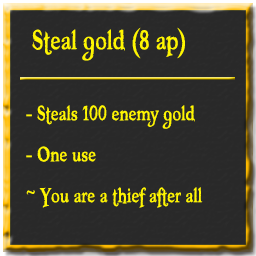
<style>
.page{position:relative;width:256px;height:256px;background:#292929}
.page>*{position:absolute;margin:0}
.t1{font:40px "Booter-ZeroZero";color:#fff600}
.t2{font:30px "Booter-ZeroZero";color:#fff600}
</style>
<div class="page">
<p class="t1" style="left:32px;top:27px;width:153px;height:34px">Steal gold (8 ap)</p>
<p class="t2" style="left:26px;top:105px;width:169px;height:24px">- Steals 100 enemy gold</p>
<p class="t2" style="left:26px;top:146px;width:70px;height:16px">- One use</p>
<p class="t2" style="left:26px;top:187px;width:177px;height:21px">~ You are a thief after all</p>
</div>
